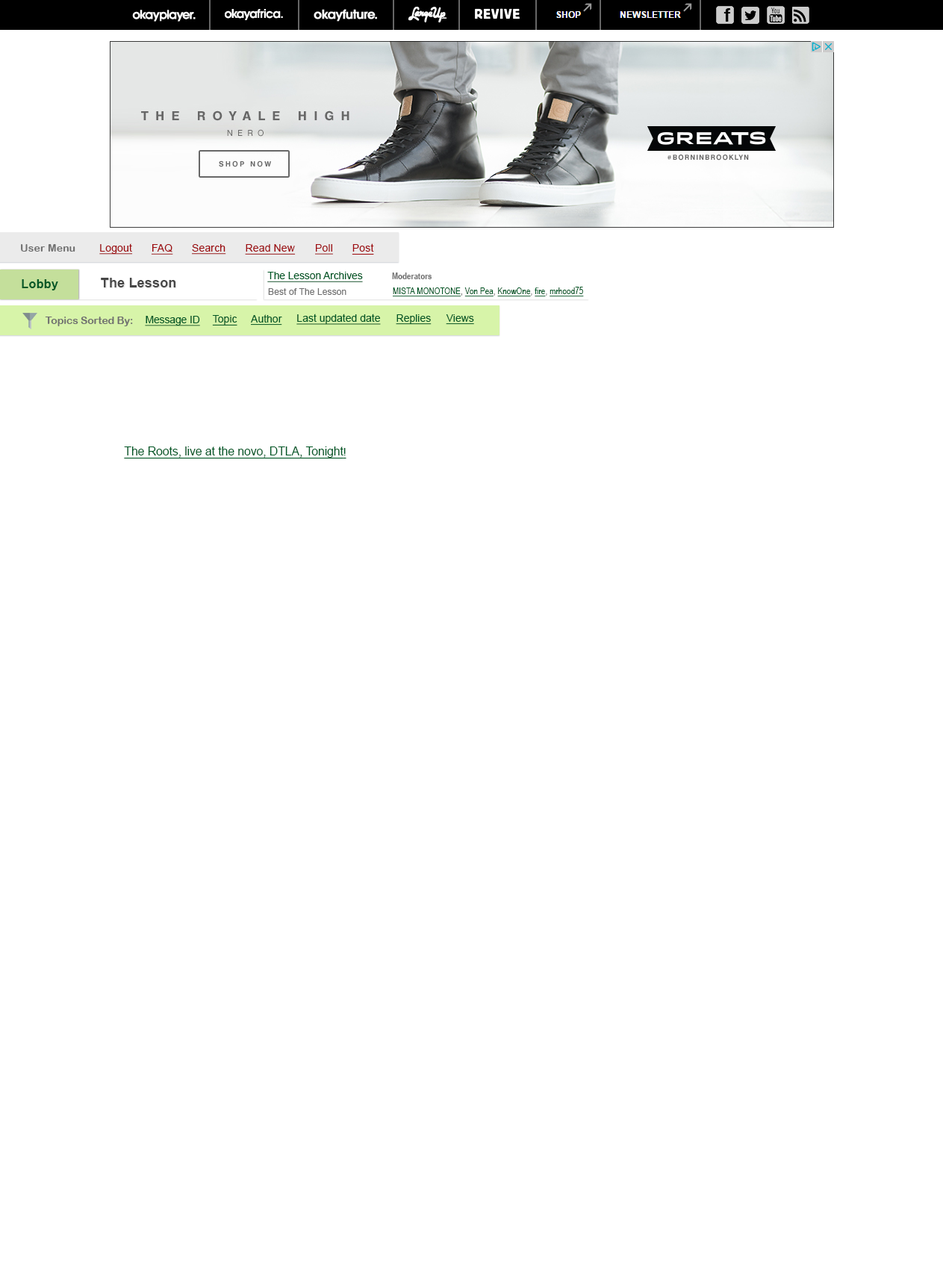
<style>
.page{position:relative;width:943px;height:1264px;background:#ffffff}
.page>*{position:absolute;margin:0}
.t1{font:10.5px "ArialRoundedMTBold";letter-spacing:0.01em;color:#707070}
.t2{font:10.5px "ArialMT";letter-spacing:0.01em;color:#9e0b0f;text-decoration:underline}
.t3{font:11.9px "Arial-BoldMT";letter-spacing:0.025em;color:#005826}
.t4{font:13.4px "Arial-BoldMT";letter-spacing:0.01em;color:#464646}
.t5{font:10.5px "ArialMT";letter-spacing:-0.01em;color:#005826;text-decoration:underline}
.t6{font:9px "ArialNarrow-Bold";color:#707070}
.t7{font:9px "ArialMT";letter-spacing:0.01em;color:#707070}
.t8{font:9px "ArialNarrow";letter-spacing:0.01em;color:#005826;text-decoration:underline}
.t9{font:9px "ArialNarrow";letter-spacing:0.01em;color:#005826}
.t10{font:10.5px "ArialRoundedMTBold";letter-spacing:-0.01em;color:#707070}
.t11{font:10.5px "ArialMT";color:#005826;text-decoration:underline}
.t12{font:11.9px "ArialMT";letter-spacing:-0.01em;color:#005826;text-decoration:underline}
</style>
<div class="page">
<p class="t1" style="left:21px;top:244px;width:54px;height:8px">User Menu</p>
<p class="t2" style="left:99px;top:243px;width:34px;height:12px">Logout</p>
<p class="t2" style="left:151px;top:244px;width:22px;height:11px">FAQ</p>
<p class="t2" style="left:192px;top:244px;width:34px;height:11px">Search</p>
<p class="t2" style="left:245px;top:244px;width:51px;height:11px">Read New</p>
<p class="t2" style="left:315px;top:244px;width:18px;height:11px">Poll</p>
<p class="t2" style="left:352px;top:243px;width:22px;height:12px">Post</p>
<p class="t3" style="left:22px;top:279px;width:36px;height:11px">Lobby</p>
<p class="t4" style="left:101px;top:278px;width:74px;height:10px">The Lesson</p>
<p class="t5" style="left:267px;top:272px;width:96px;height:10px">The Lesson Archives</p>
<p class="t6" style="left:392px;top:273px;width:40px;height:6px">Moderators</p>
<p class="t7" style="left:268px;top:288px;width:79px;height:7px">Best of The Lesson</p>
<p class="t8" style="left:393px;top:287px;width:191px;height:9px">MISTA MONOTONE<span class="t9">, </span>Von Pea<span class="t9">, </span>KnowOne<span class="t9">, </span>fire<span class="t9">, </span>mrhood75</p>
<p class="t10" style="left:45px;top:317px;width:88px;height:9px">Topics Sorted By:</p>
<p class="t5" style="left:145px;top:316px;width:55px;height:10px">Message ID</p>
<p class="t11" style="left:212px;top:315px;width:25px;height:11px">Topic</p>
<p class="t11" style="left:251px;top:314px;width:31px;height:12px">Author</p>
<p class="t11" style="left:296px;top:314px;width:85px;height:11px">Last updated date</p>
<p class="t11" style="left:396px;top:314px;width:36px;height:11px">Replies</p>
<p class="t11" style="left:446px;top:314px;width:28px;height:11px">Views</p>
<p class="t12" style="left:124px;top:447px;width:223px;height:12px">The Roots, live at the novo, DTLA, Tonight<span class="t5">!</span></p>
</div>
